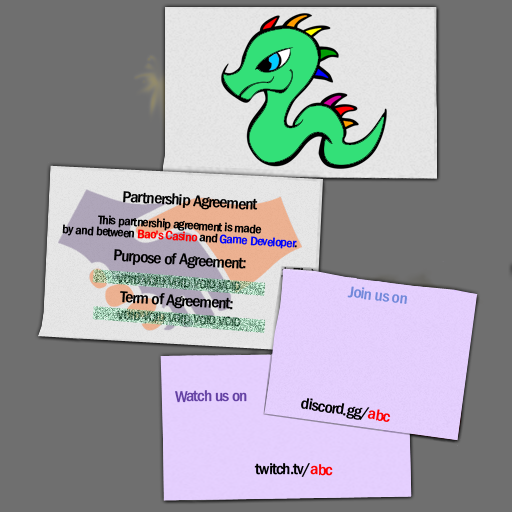
<style>
.page{position:relative;width:512px;height:512px;background:#6f6f6f}
.page>*{position:absolute;margin:0}
.t1{font:16.2px "FranklinGothic-MedCnd";letter-spacing:-0.05em;color:#000000;scale:1.11 1}
.t2{font:12.6px/5.8px "FranklinGothic-MedCnd";letter-spacing:-0.05em;color:#000000;scale:1.11 1}
.t3{font:12.6px/5.8px "FranklinGothic-MedCnd";letter-spacing:-0.05em;color:#ff0000;scale:1.11 1}
.t4{font:12.6px/5.8px "FranklinGothic-MedCnd";letter-spacing:-0.05em;color:#0006ff;scale:1.11 1}
.t5{font:16.2px/5.8px "FranklinGothic-MedCnd";letter-spacing:-0.05em;color:#000000;scale:1.11 1}
.t6{font:12.6px "FranklinGothic-MedCnd";letter-spacing:-0.05em;scale:1.11 1}
.t7{font:16.2px "FranklinGothic-MedCnd";letter-spacing:-0.05em;color:#7289da;scale:1.11 1}
.t8{font:16.2px "FranklinGothic-MedCnd";letter-spacing:-0.05em;color:#6441a4;scale:1.11 1}
.t9{font:16.2px "FranklinGothic-MedCnd";letter-spacing:-0.05em;color:#ff0000;scale:1.11 1}
</style>
<div class="page">
<p class="t1" style="left:123px;top:191px;width:135px;height:19px;rotate:3deg">Partnership Agreement</p>
<p class="t2" style="left:62px;top:215px;width:235px;height:34px;text-align:center;rotate:3deg">This partnership agreement is made<br><br> by and between <span class="t3">Bao's Casino</span> and <span class="t4">Game Developer</span>.</p>
<p class="t5" style="left:114px;top:249px;width:132px;height:61px;text-align:center;rotate:3deg">Purpose of Agreement:<br><br><br><br><br><br><br>Term of Agreement:</p>
<p class="t6" style="left:117px;top:274px;width:124px;height:17px;rotate:3deg">VOID VOID VOID VOID VOID</p>
<p class="t7" style="left:347px;top:286px;width:60px;height:18px;rotate:7deg">Join us on</p>
<p class="t6" style="left:117px;top:310px;width:124px;height:17px;rotate:3deg">VOID VOID VOID VOID VOID</p>
<p class="t8" style="left:175px;top:390px;width:72px;height:13px">Watch us on</p>
<p class="t1" style="left:301px;top:398px;width:90px;height:24px;rotate:9deg">discord.gg/<span class="t9">abc</span></p>
<p class="t1" style="left:254px;top:463px;width:79px;height:14px;rotate:1deg">twitch.tv/<span class="t9">abc</span></p>
</div>
